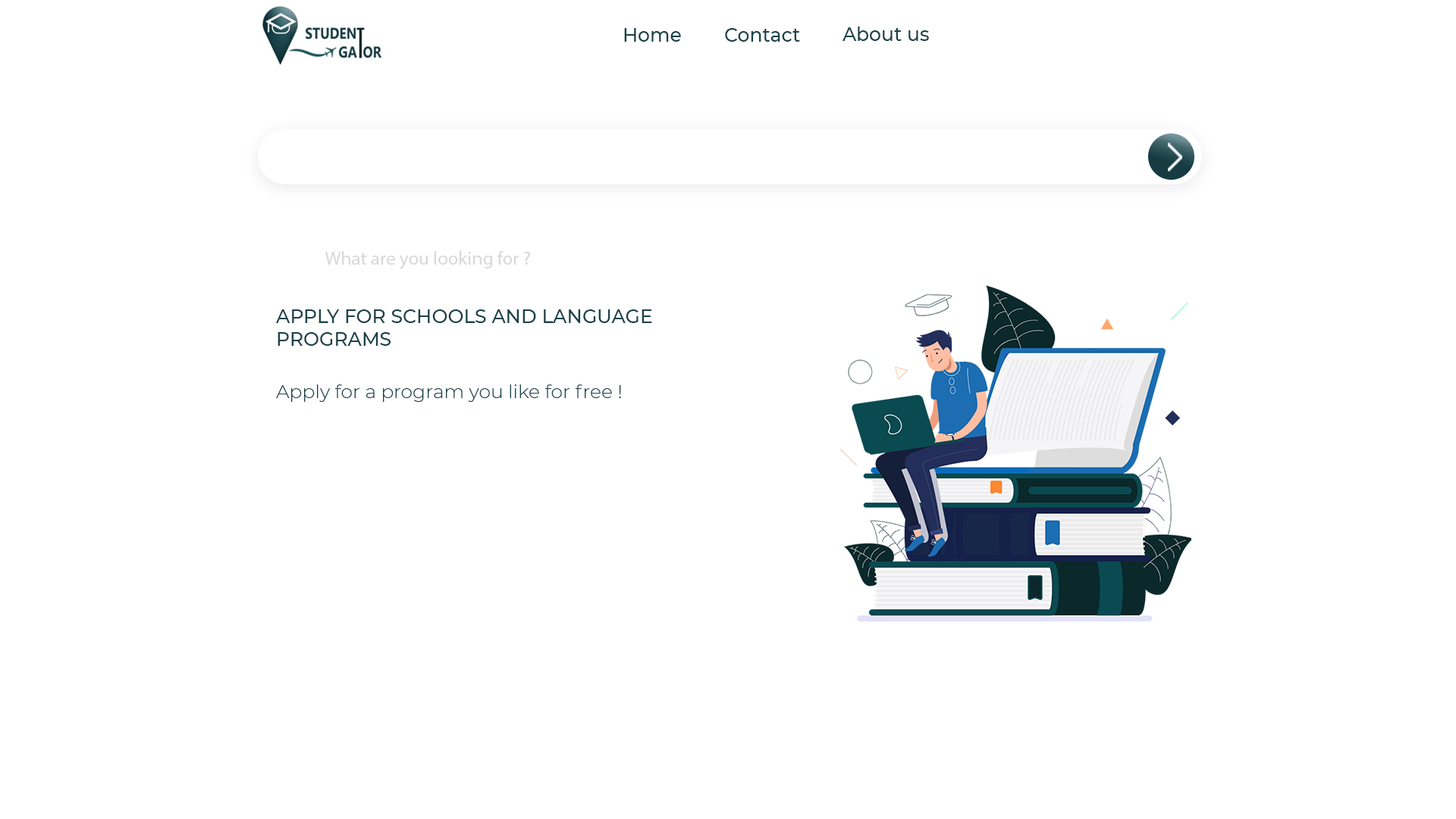
<style>
.page{position:relative;width:1456px;height:819px;background:#ffffff}
.page>*{position:absolute;margin:0}
.t1{font:19px "Montserrat-Medium";color:#1b4249}
.t2{font:19px "MyriadPro-Regular";color:#d9d7d7}
.t3{font:19px "Montserrat-Light";color:#1b4249}
</style>
<div class="page">
<p class="t1" style="left:624px;top:28px;width:57px;height:14px">Home</p>
<p class="t1" style="left:725px;top:28px;width:75px;height:14px">Contact</p>
<p class="t1" style="left:842px;top:27px;width:87px;height:14px">About us</p>
<p class="t2" style="left:325px;top:251px;width:205px;height:18px">What are you looking for ?</p>
<p class="t1" style="left:276px;top:309px;width:376px;height:37px">APPLY FOR SCHOOLS AND LANGUAGE PROGRAMS</p>
<p class="t3" style="left:276px;top:384px;width:345px;height:18px">Apply for a program you like for free !</p>
</div>
